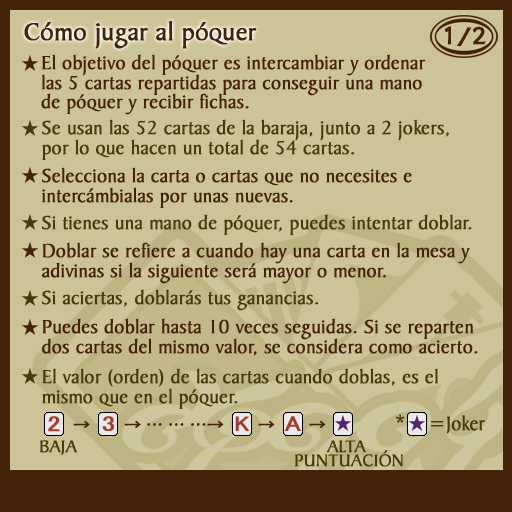
<style>
.page{position:relative;width:512px;height:512px;background:#ccc396}
.page>*{position:absolute;margin:0}
.t1{font:26.9px "BakerSignetBT-Roman";color:#45230a;font-weight:bold}
.t2{font:20.2px/19.6px "BakerSignetBT-Roman";color:#45230a;font-weight:bold}
.t3{font:20.2px/19.6px "BakerSignetBT-Roman";color:#463c0a;font-weight:bold}
.t4{font:20.2px "BakerSignetBT-Roman";color:#463c0a;font-weight:bold}
.t5{font:18px/14.6px "BakerSignetBT-Roman";color:#463c0a;font-weight:bold}
</style>
<div class="page">
<p class="t1" style="left:24px;top:21px;width:233px;height:28px">Cómo jugar al póquer</p>
<p class="t2" style="left:41px;top:54px;width:385px;height:61px">El objetivo del póquer es intercambiar y ordenar<br>las 5 cartas repartidas para conseguir una mano<br>de póquer y recibir fichas.</p>
<p class="t3" style="left:42px;top:119px;width:407px;height:41px">Se usan las 52 cartas de la baraja, junto a 2 jokers,<br>por lo que hacen un total de 54 cartas.</p>
<p class="t2" style="left:42px;top:167px;width:370px;height:41px">Selecciona la carta o cartas que no necesites e<br>intercámbialas por unas nuevas.</p>
<p class="t4" style="left:42px;top:214px;width:430px;height:21px">Si tienes una mano de póquer, puedes intentar doblar.</p>
<p class="t2" style="left:42px;top:242px;width:428px;height:42px">Doblar se refiere a cuando hay una carta en la mesa y<br>adivinas si la siguiente será mayor o menor.</p>
<p class="t4" style="left:42px;top:289px;width:277px;height:22px">Si aciertas, doblarás tus ganancias.</p>
<p class="t2" style="left:42px;top:318px;width:436px;height:38px">Puedes doblar hasta 10 veces seguidas. Si se reparten<br>dos cartas del mismo valor, se considera como acierto.</p>
<p class="t3" style="left:42px;top:368px;width:396px;height:41px">El valor (orden) de las cartas cuando doblas, es el<br>mismo que en el póquer.</p>
<p class="t5" style="left:40px;top:440px;width:363px;height:27px">BAJA                                                ALTA<br>                                                 PUNTUACIÓN</p>
</div>
